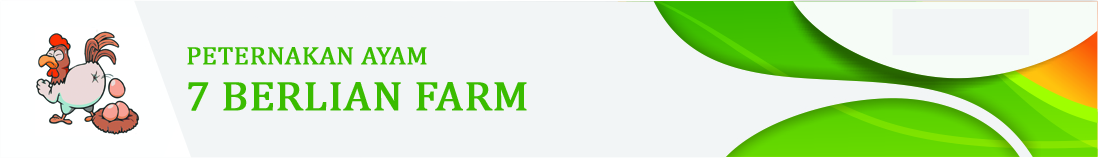
<style>
.page{position:relative;width:1098px;height:158px;background:#f2f5f6}
.page>*{position:absolute;margin:0}
.t1{font:25px "Cambria";color:#3abc00;font-weight:bold;scale:1.05 1}
.t2{font:41.7px "Cambria";color:#3abc00;font-weight:bold;scale:1.05 1}
</style>
<div class="page">
<p class="t1" style="left:187px;top:47px;width:240px;height:18px">PETERNAKAN AYAM</p>
<p class="t2" style="left:188px;top:82px;width:339px;height:29px">7 BERLIAN FARM</p>
</div>
